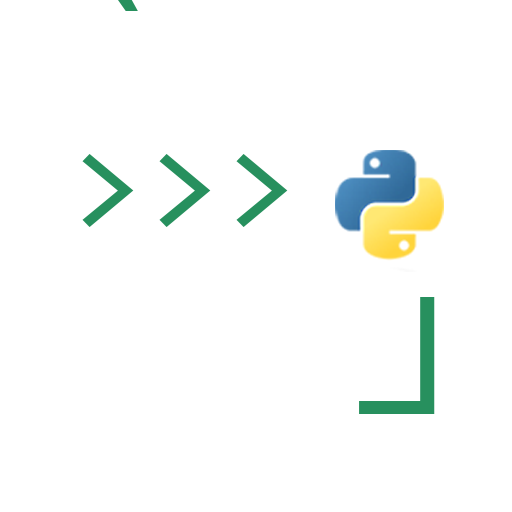
<style>
.page{position:relative;width:512px;height:512px;background:#ffffff}
.page>*{position:absolute;margin:0}
.t1{font:133.3px "Consolas";letter-spacing:0.025em;color:#27905e}
.t2{font:166.7px "SpaceMono-Regular";color:#27905e}
</style>
<div class="page">
<p class="t1" style="left:82px;top:154px;width:206px;height:73px">&gt;&gt;&gt;</p>
<p class="t2" style="left:359px;top:297px;width:76px;height:117px;rotate:180deg">L</p>
</div>
